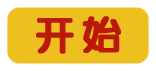
<style>
.page{position:relative;width:156px;height:71px;background:#edbf1f}
.page>*{position:absolute;margin:0}
.t1{font:40px "JCuYuan";letter-spacing:0.15em;color:#bc180c;font-weight:bold}
</style>
<div class="page">
<p class="t1" style="left:36px;top:16px;width:85px;height:38px">开始</p>
</div>
